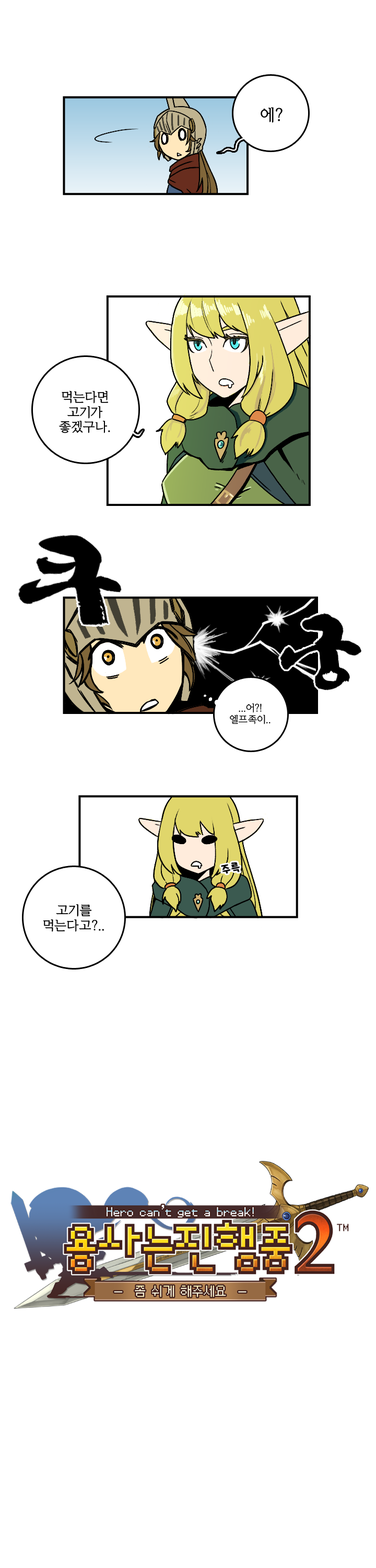
<style>
.page{position:relative;width:376px;height:1568px;background:#ffffff}
.page>*{position:absolute;margin:0}
.t1{font:15.7px "KoreanYMJ-B";color:#000000}
.t2{font:12.5px "KoreanYMJ-B";color:#000000}
.t3{font:9.4px "KoreanYMJ-B";color:#000000}
</style>
<div class="page">
<p class="t1" style="left:261px;top:107px;width:22px;height:16px">에?</p>
<p class="t2" style="left:59px;top:391px;width:51px;height:42px;text-align:center">먹는다면<br>고기가<br>좋겠구나.</p>
<p class="t3" style="left:230px;top:703px;width:41px;height:21px;text-align:center">...어?!<br>엘프족이..</p>
<p class="t2" style="left:43px;top:904px;width:61px;height:28px;text-align:center">고기를<br>먹는다고?..</p>
</div>
